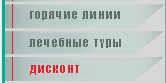
<style>
.page{position:relative;width:166px;height:83px}
.page>*{position:absolute;margin:0}
.t1{font:12px "Impact";letter-spacing:0.1em;color:#5b7066}
.t2{font:12px "Impact";letter-spacing:0.1em;color:#ee1e26}
</style>
<div class="page">
<p class="t1" style="left:30px;top:11px;width:90px;height:9px">горячие линии</p>
<p class="t1" style="left:29px;top:38px;width:92px;height:10px">лечебные туры</p>
<p class="t2" style="left:30px;top:65px;width:49px;height:10px">дисконт</p>
</div>
